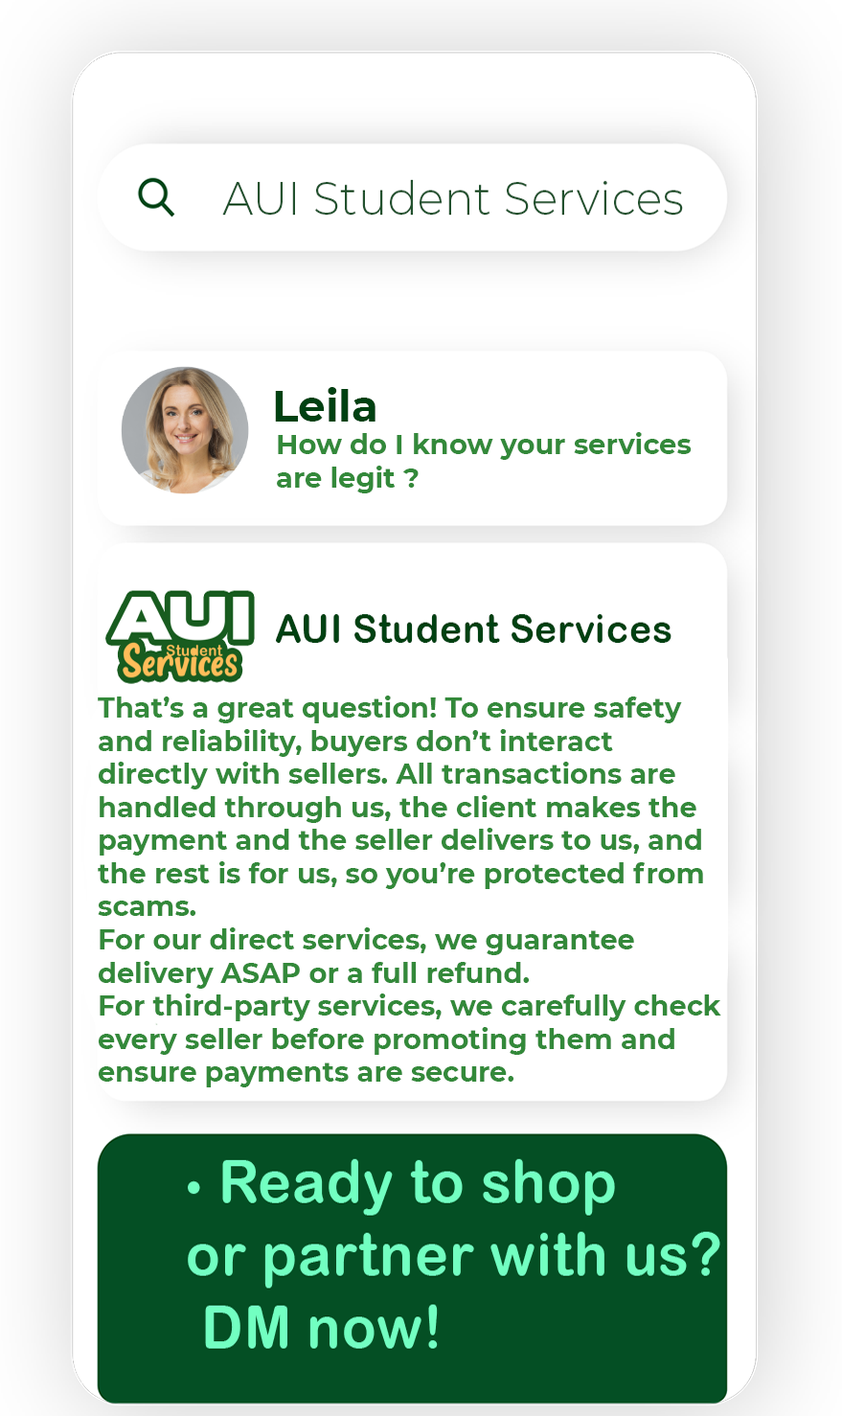
<style>
.page{position:relative;width:842px;height:1416px;background:#ffffff}
.page>*{position:absolute;margin:0}
.t1{font:43.4px "Montserrat-Bold";color:#004112}
.t2{font:27.7px "Montserrat-Bold";color:#33893a}
.t3{font:27.6px "Montserrat-Bold";color:#33893a}
</style>
<div class="page">
<p class="t1" style="left:275px;top:387px;width:101px;height:35px">Leila</p>
<p class="t2" style="left:277px;top:432px;width:415px;height:61px">How do I know your services<br>are legit ?</p>
<p class="t3" style="left:98px;top:696px;width:623px;height:391px">That’s a great question! To ensure safety <br>and reliability, buyers don’t interact <br>directly with sellers. All transactions are <br>handled through us, the client makes the<br>payment and the seller delivers to us, and <br>the rest is for us, so you’re protected from <br>scams.<br>For our direct services, we guarantee <br>delivery ASAP or a full refund. <br>For third-party services, we carefully check <br>every seller before promoting them and <br>ensure payments are secure.</p>
</div>
